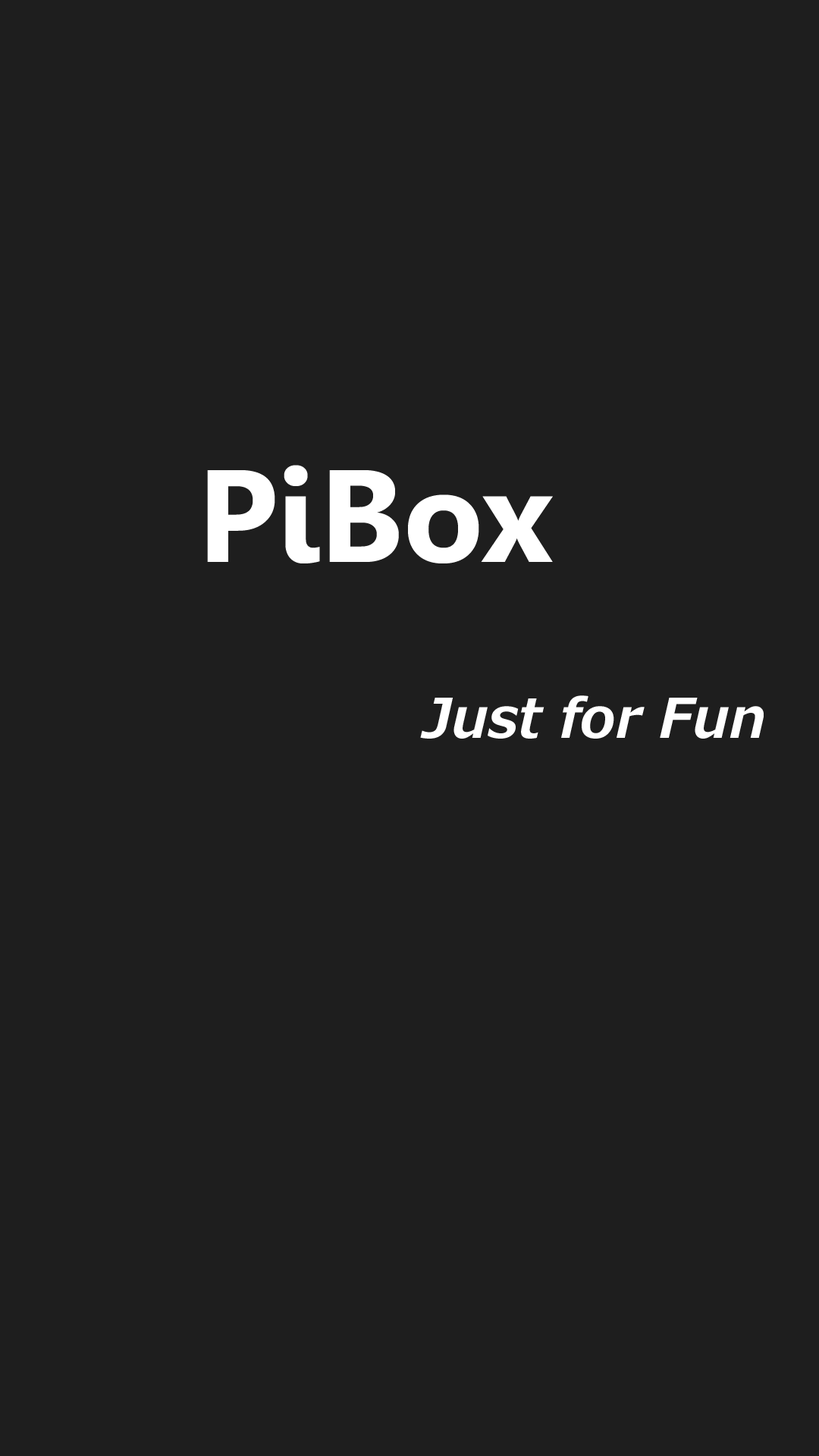
<style>
.page{position:relative;width:819px;height:1456px;background:#1e1e1e}
.page>*{position:absolute;margin:0}
.t1{font:131px "Gisha-Bold";color:#ffffff}
.t2{font:54.6px "MeiryoUI-BoldItalic";color:#ffffff}
</style>
<div class="page">
<p class="t1" style="left:207px;top:465px;width:346px;height:98px">PiBox</p>
<p class="t2" style="left:420px;top:695px;width:344px;height:44px"><span class="t1">  </span>Just for Fun</p>
</div>
